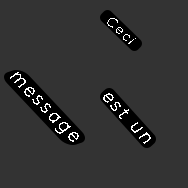
<style>
.page{position:relative;width:188px;height:188px;background:#333333}
.page>*{position:absolute;margin:0}
.t1{font:14.1px "Maax-Italic";letter-spacing:0.1em;color:#ffffff;scale:1.03 1}
.t2{font:20px "Maax-Italic";letter-spacing:0.1em;color:#ffffff}
.t3{font:19.5px "Maax-Italic";letter-spacing:0.1em;color:#ffffff}
</style>
<div class="page">
<p class="t1" style="left:107px;top:18px;width:29px;height:26px;rotate:44deg">Ceci</p>
<p class="t2" style="left:10px;top:72px;width:69px;height:70px;rotate:46deg">message</p>
<p class="t3" style="left:103px;top:93px;width:48px;height:51px;rotate:48deg">est un</p>
</div>
